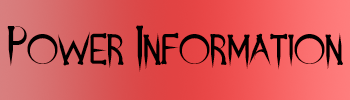
<style>
.page{position:relative;width:350px;height:100px}
.page>*{position:absolute;margin:0}
.t1{font:50px "DemonsandDarlings";color:#000000}
</style>
<div class="page">
<p class="t1" style="left:7px;top:25px;width:336px;height:47px">Power Information</p>
</div>
